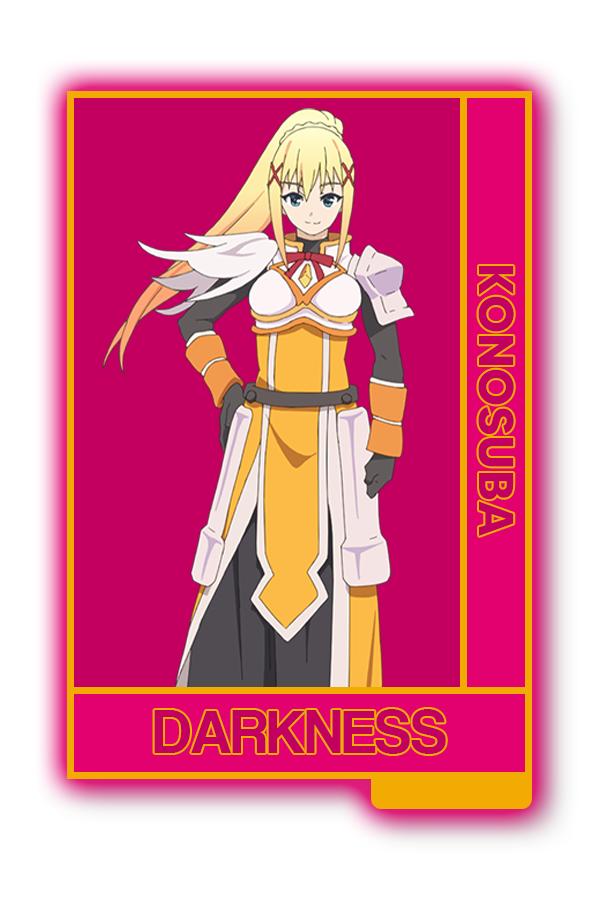
<style>
.page{position:relative;width:600px;height:900px;background:#c3005f}
.page>*{position:absolute;margin:0}
.t1{font:48.8px "MADETOMMY-Bold";color:#c3005f}
.t2{font:62.7px "CoolveticaRg-Regular";color:#c3005f}
</style>
<div class="page">
<p class="t1" style="left:478px;top:266px;width:36px;height:270px;rotate:90deg">KONOSUBA</p>
<p class="t2" style="left:154px;top:709px;width:292px;height:45px">DARKNESS</p>
</div>
